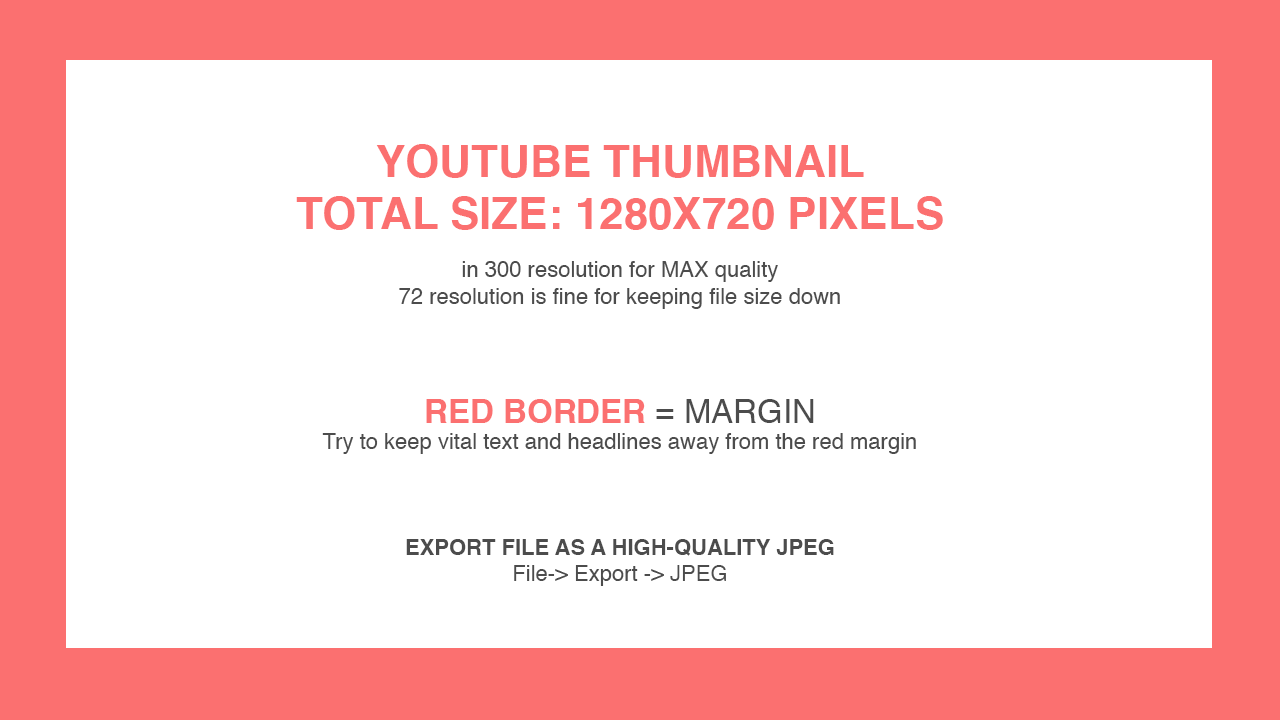
<style>
.page{position:relative;width:1280px;height:720px;background:#ffffff}
.page>*{position:absolute;margin:0}
.t1{font:22px "Helvetica";color:#4c4c4c}
.t2{font:44px "Helvetica-Bold";color:#fb7070;text-transform:uppercase}
.t3{font:22px/48px "Helvetica";color:#4c4c4c}
.t4{font:33px "Helvetica-Bold";color:#fb7070;text-transform:uppercase}
.t5{font:33px "Helvetica";color:#4c4c4c;text-transform:uppercase}
.t6{font:22px "Helvetica-Bold";color:#4c4c4c;text-transform:uppercase}
</style>
<div class="page">
<p class="t1" style="left:296px;top:144px;width:647px;height:442px;text-align:center"><span class="t2"><br>YOUTUBE THUMBNAIL<br>TOtal size: 1280x720 Pixels<br></span><span class="t3">in 300 resolution for MAX quality<br></span>72 resolution is fine for keeping file size down<br><br><br><span class="t4">RED BORDER</span><span class="t5"> = MARGIN<br></span>Try to keep vital text and headlines away from the red margin<br><br><br><br><span class="t6">Export file as a high-quality JPEG<br></span>File-&gt; Export -&gt; JPEG</p>
</div>
